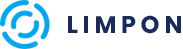
<style>
.page{position:relative;width:183px;height:49px;background:#ffffff}
.page>*{position:absolute;margin:0}
.t1{font:24px "Poppins-Bold";letter-spacing:0.2em;color:#192b59;text-transform:uppercase}
</style>
<div class="page">
<p class="t1" style="left:68px;top:15px;width:113px;height:19px">Limpon</p>
</div>
